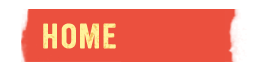
<style>
.page{position:relative;width:253px;height:71px;background:#eb503e}
.page>*{position:absolute;margin:0}
.t1{font:30px "Ultramagnetic";letter-spacing:0.025em;color:#fff29b;font-weight:bold}
</style>
<div class="page">
<p class="t1" style="left:43px;top:23px;width:73px;height:26px">HOME</p>
</div>
